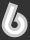
<style>
.page{position:relative;width:30px;height:40px;background:#333333}
.page>*{position:absolute;margin:0}
.t1{font:50px "Bauhaus93";letter-spacing:0.2em}
</style>
<div class="page">
<p class="t1" style="left:1px;top:2px;width:27px;height:36px">6</p>
</div>
